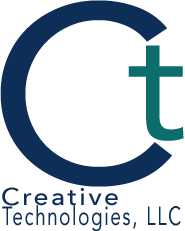
<style>
.page{position:relative;width:185px;height:231px;background:#ffffff}
.page>*{position:absolute;margin:0}
.t1{font:250px "Avenir-Roman";letter-spacing:0.1em;color:#0d2e57;scale:1.09 1}
.t2{font:155px "Avenir-Roman";letter-spacing:0.1em;color:#0b6e6c;scale:1.09 1}
.t3{font:24px "AvenirNext-Medium";letter-spacing:0.1em;color:#0d2e57;scale:1.09 1}
.t4{font:26px "Avenir-Roman";letter-spacing:0.1em;color:#0d2e57;scale:0.71 1}
</style>
<div class="page">
<p class="t1" style="left:0px;top:0px;width:172px;height:187px">C</p>
<p class="t2" style="left:128px;top:45px;width:56px;height:96px">t</p>
<p class="t3" style="left:2px;top:187px;width:116px;height:19px">Creative</p>
<p class="t4" style="left:2px;top:205px;width:179px;height:27px">Technologies, LLC</p>
</div>
